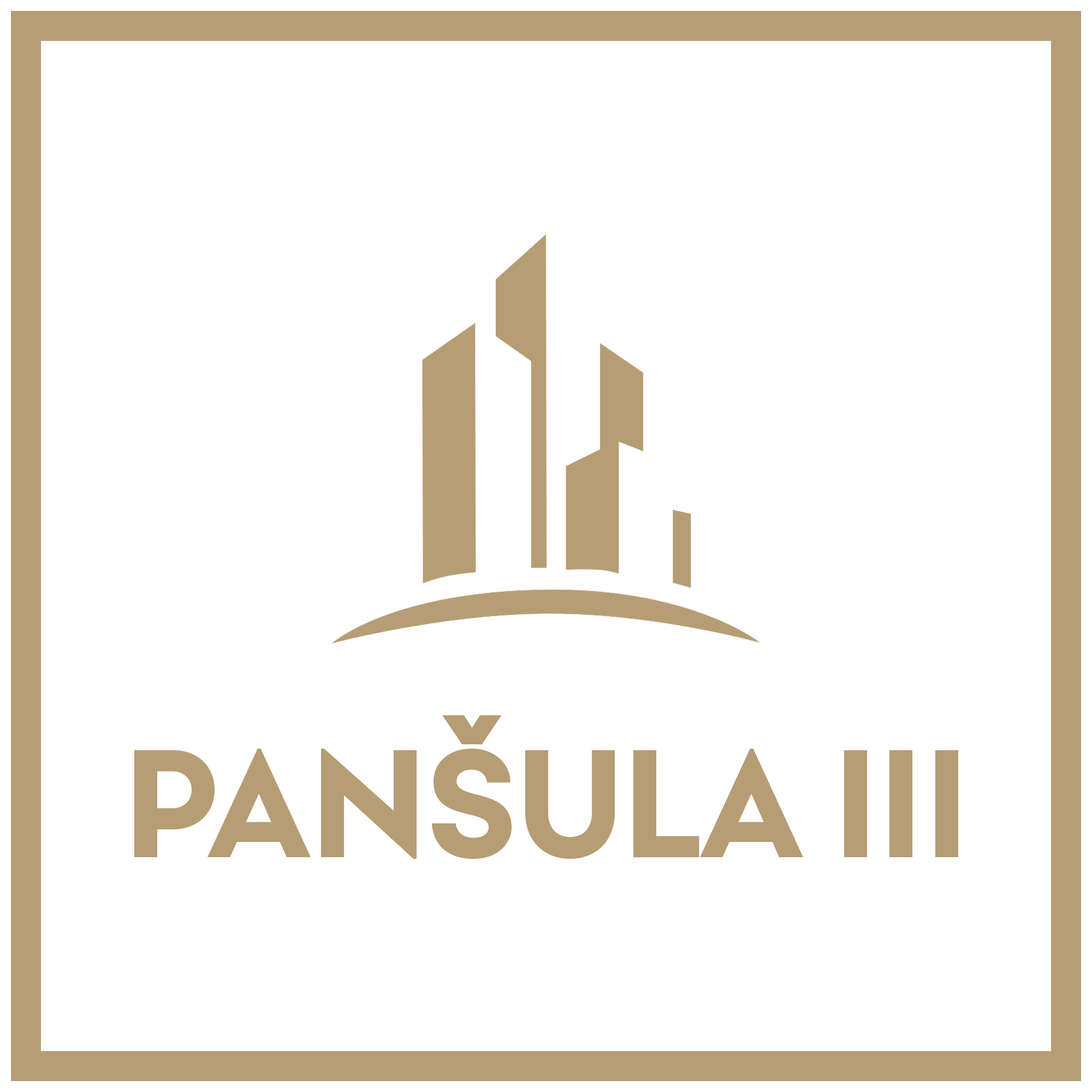
<style>
.page{position:relative;width:1092px;height:1092px;background:#ffffff}
.page>*{position:absolute;margin:0}
.t1{font:152.9px "SetupGrotesk-Bold";color:#b69d74}
</style>
<div class="page">
<p class="t1" style="left:134px;top:715px;width:824px;height:144px">PANŠULA III</p>
</div>
